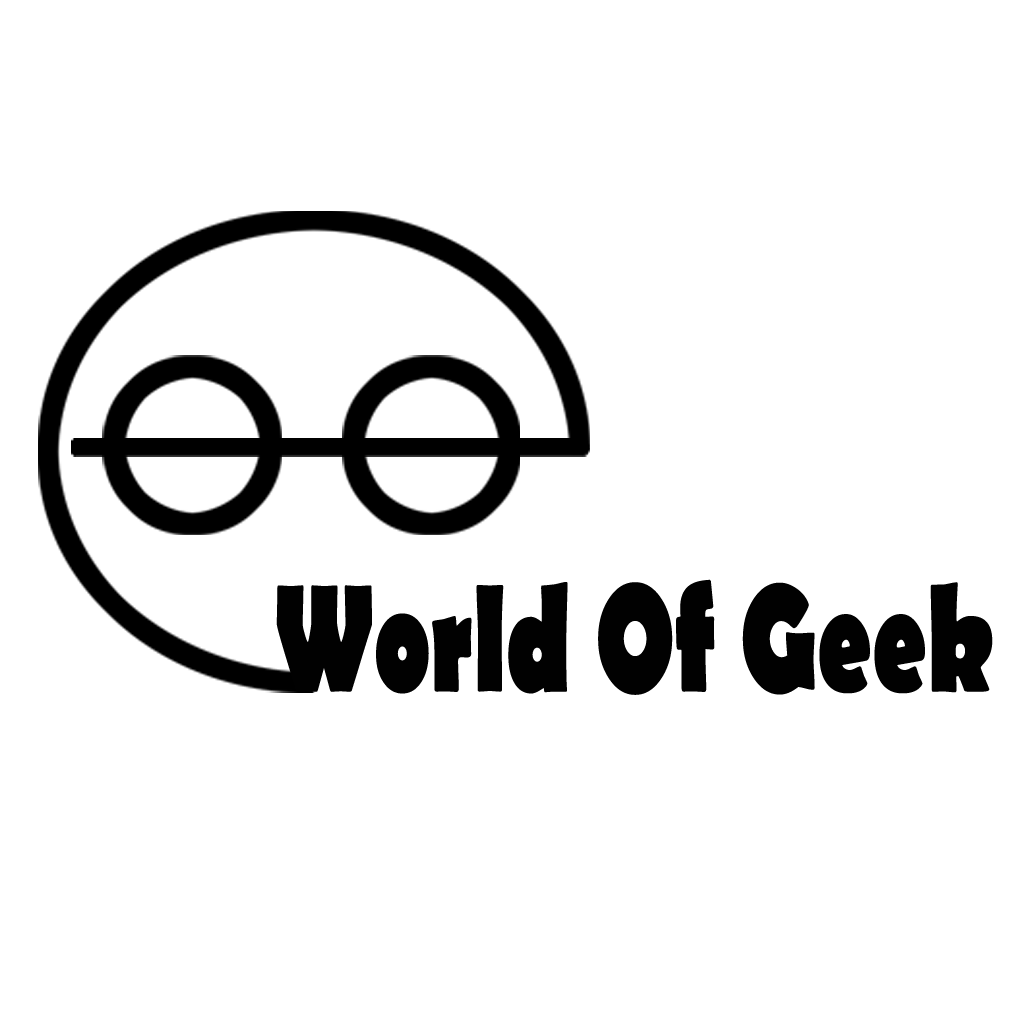
<style>
.page{position:relative;width:1024px;height:1024px;background:#ffffff}
.page>*{position:absolute;margin:0}
.t1{font:154.7px "BerlinSansFB-Bold";color:#010101;scale:0.66 1}
</style>
<div class="page">
<p class="t1" style="left:276px;top:579px;width:717px;height:116px">World Of Geek</p>
</div>
